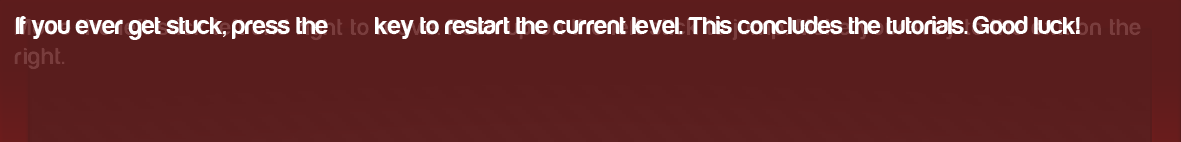
<style>
.page{position:relative;width:1181px;height:142px;background:#591d1d}
.page>*{position:absolute;margin:0}
.t1{font:26px "Harabara";color:#ffffff}
</style>
<div class="page">
<p class="t1" style="left:16px;top:16px;width:1064px;height:24px">If you ever get stuck, press the        key to restart the current level. This concludes the tutorials. Good luck!</p>
</div>
